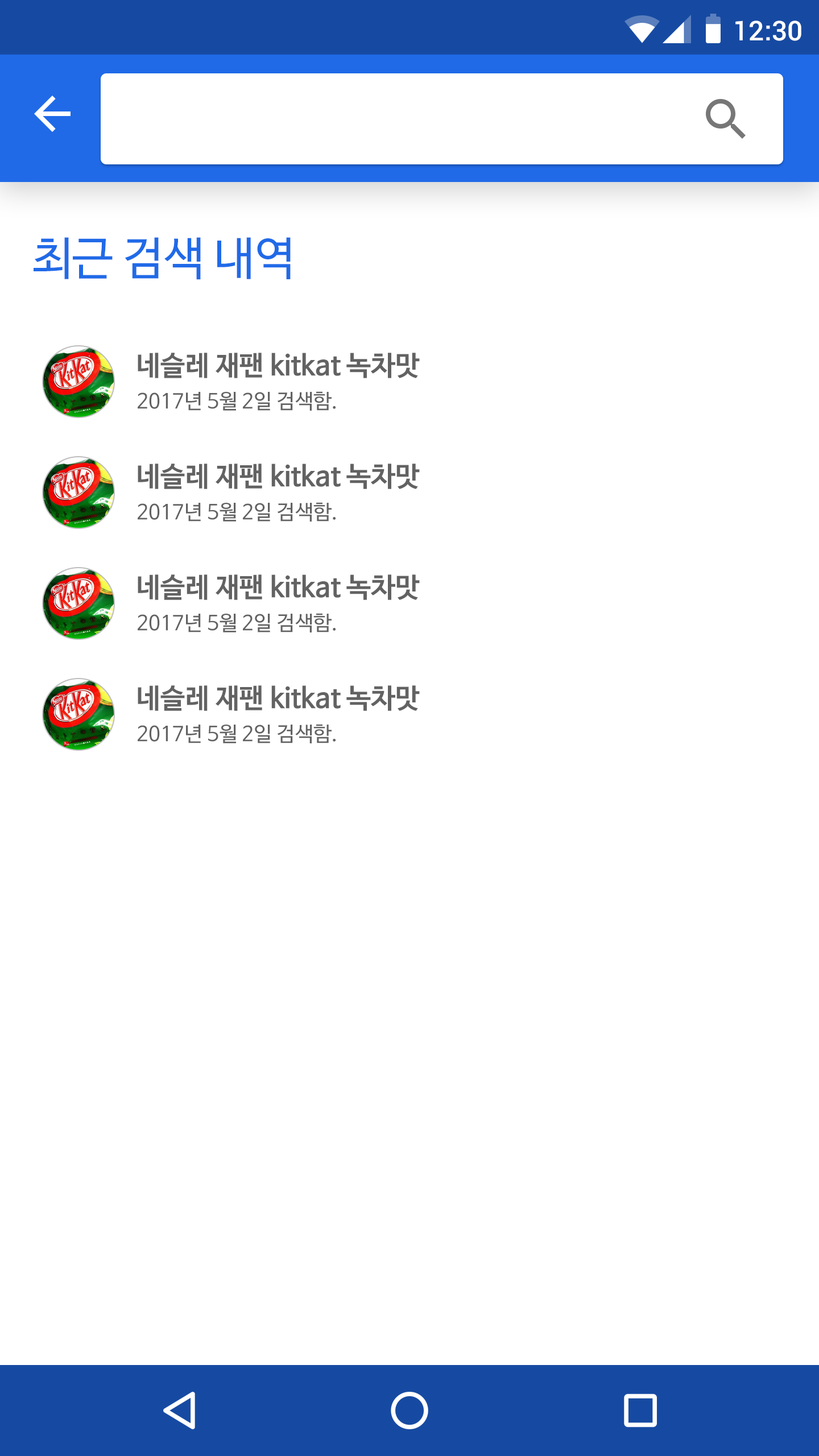
<style>
.page{position:relative;width:819px;height:1456px;background:#ffffff}
.page>*{position:absolute;margin:0}
.t1{font:27.3px "Roboto-Medium";color:#ffffff}
.t2{font:45.5px "NanumBarunGothic";color:#206ae8}
.t3{font:27.3px "NanumBarunGothicBold";color:#626262}
.t4{font:20.5px "NanumBarunGothic";color:#626262}
</style>
<div class="page">
<p class="t1" style="left:735px;top:20px;width:66px;height:21px">12:30</p>
<p class="t2" style="left:34px;top:237px;width:257px;height:43px">최근 검색 내역</p>
<p class="t3" style="left:138px;top:353px;width:282px;height:25px">네슬레 재팬 kitkat 녹차맛</p>
<p class="t4" style="left:138px;top:391px;width:198px;height:20px">2017년 5월 2일 검색함.</p>
<p class="t3" style="left:138px;top:464px;width:282px;height:25px">네슬레 재팬 kitkat 녹차맛</p>
<p class="t4" style="left:138px;top:502px;width:198px;height:20px">2017년 5월 2일 검색함.</p>
<p class="t3" style="left:138px;top:574px;width:282px;height:26px">네슬레 재팬 kitkat 녹차맛</p>
<p class="t4" style="left:138px;top:613px;width:198px;height:19px">2017년 5월 2일 검색함.</p>
<p class="t3" style="left:138px;top:685px;width:282px;height:26px">네슬레 재팬 kitkat 녹차맛</p>
<p class="t4" style="left:138px;top:724px;width:198px;height:19px">2017년 5월 2일 검색함.</p>
</div>
